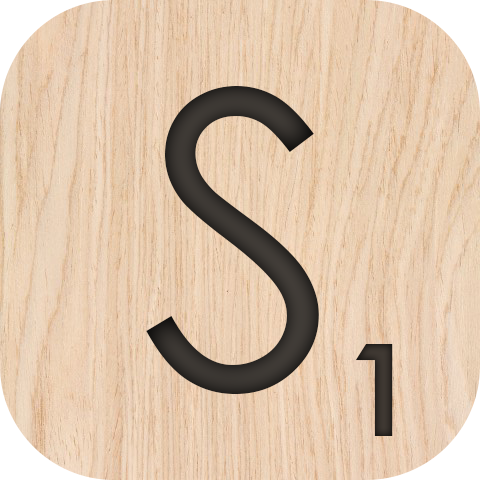
<style>
.page{position:relative;width:480px;height:480px}
.page>*{position:absolute;margin:0}
.t1{font:410px "CenturyGothic";color:#36322e}
.t2{font:128px "CenturyGothic-Bold";color:#403933}
</style>
<div class="page">
<p class="t1" style="left:146px;top:86px;width:173px;height:308px">S</p>
<p class="t2" style="left:355px;top:344px;width:38px;height:92px">1</p>
</div>
